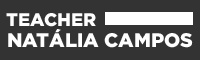
<style>
.page{position:relative;width:200px;height:60px;background:#333333}
.page>*{position:absolute;margin:0}
.t1{font:18.2px "Gotham-Black";color:#ffffff;text-transform:uppercase}
.t2{font:19.6px "Gotham-Black";color:#ffffff;text-transform:uppercase}
</style>
<div class="page">
<p class="t1" style="left:6px;top:13px;width:90px;height:14px">Teacher</p>
<p class="t2" style="left:8px;top:29px;width:185px;height:19px">Natália campos</p>
</div>
